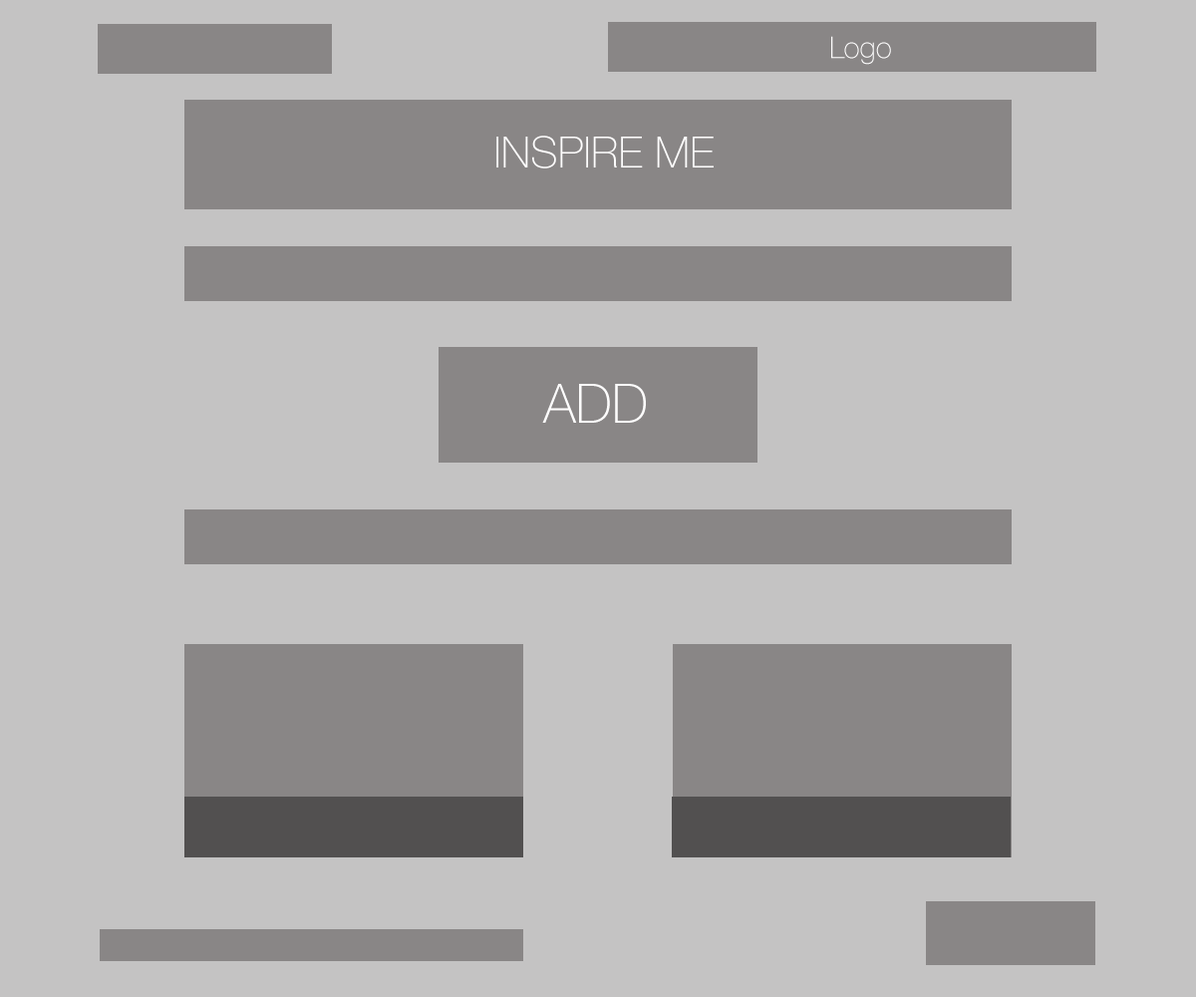
<style>
.page{position:relative;width:1196px;height:997px;background:#c4c3c3}
.page>*{position:absolute;margin:0}
.t1{font:30px "HelveticaNeue-Thin";color:#fefdfd}
.t2{font:43.4px "HelveticaNeue-Thin";color:#fefdfd}
.t3{font:54.4px "HelveticaNeue-Thin";color:#fefdfd}
</style>
<div class="page">
<p class="t1" style="left:831px;top:36px;width:60px;height:29px">Logo</p>
<p class="t2" style="left:496px;top:136px;width:218px;height:32px">INSPIRE ME</p>
<p class="t3" style="left:542px;top:384px;width:104px;height:39px">ADD</p>
</div>
